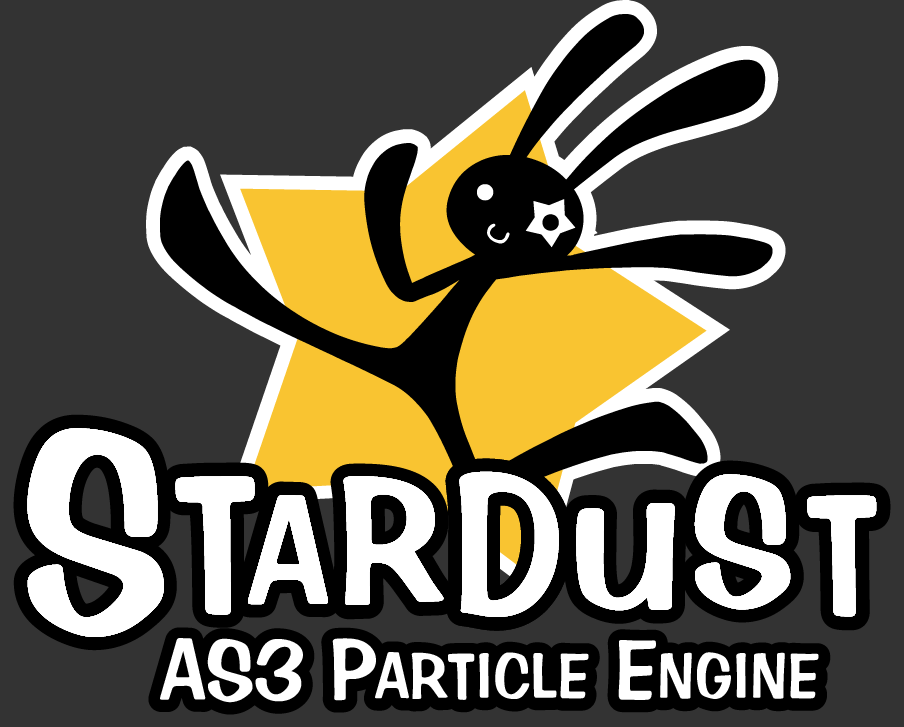
<style>
.page{position:relative;width:904px;height:727px;background:#333333}
.page>*{position:absolute;margin:0}
.t1{font:269.5px "DFPOP1-W9-HKP-BF";color:#ffffff;scale:0.93 1}
.t2{font:186.4px "DFPOP1-W9-HKP-BF";color:#ffffff}
.t3{font:183.3px "DFPOP1-W9-HKP-BF";color:#ffffff}
.t4{font:170.7px "DFPOP1-W9-HKP-BF";color:#ffffff}
.t5{font:174.4px "DFPOP1-W9-HKP-BF";color:#ffffff}
.t6{font:144.7px "DFPOP1-W9-HKP-BF";color:#ffffff}
.t7{font:160.2px "DFPOP1-W9-HKP-BF";color:#ffffff}
.t8{font:143.7px "DFPOP1-W9-HKP-BF";color:#ffffff;scale:1.3 1}
.t9{font:61.5px "DFPOP1-W9-HKP-BF";color:#ffffff}
.t10{font:82px "DFPOP1-W9-HKP-BF";color:#ffffff}
</style>
<div class="page">
<p class="t1" style="left:27px;top:428px;width:137px;height:209px">S</p>
<p class="t1" style="left:27px;top:428px;width:137px;height:209px">S</p>
<p class="t1" style="left:27px;top:428px;width:137px;height:209px">S</p>
<p class="t1" style="left:27px;top:428px;width:137px;height:209px">S</p>
<p class="t1" style="left:27px;top:428px;width:137px;height:209px">S</p>
<p class="t2" style="left:459px;top:471px;width:100px;height:146px">D</p>
<p class="t2" style="left:459px;top:471px;width:100px;height:146px">D</p>
<p class="t2" style="left:459px;top:471px;width:100px;height:146px">D</p>
<p class="t2" style="left:459px;top:471px;width:100px;height:146px">D</p>
<p class="t2" style="left:459px;top:471px;width:100px;height:146px">D</p>
<p class="t3" style="left:175px;top:476px;width:80px;height:139px">T</p>
<p class="t3" style="left:175px;top:476px;width:80px;height:139px">T</p>
<p class="t3" style="left:175px;top:476px;width:80px;height:139px">T</p>
<p class="t3" style="left:175px;top:476px;width:80px;height:139px">T</p>
<p class="t3" style="left:175px;top:476px;width:80px;height:139px">T</p>
<p class="t4" style="left:343px;top:476px;width:101px;height:129px">R</p>
<p class="t4" style="left:343px;top:476px;width:101px;height:129px">R</p>
<p class="t4" style="left:343px;top:476px;width:101px;height:129px">R</p>
<p class="t4" style="left:343px;top:476px;width:101px;height:129px">R</p>
<p class="t4" style="left:343px;top:476px;width:101px;height:129px">R</p>
<p class="t5" style="left:694px;top:474px;width:97px;height:136px">S</p>
<p class="t5" style="left:694px;top:474px;width:97px;height:136px">S</p>
<p class="t5" style="left:694px;top:474px;width:97px;height:136px">S</p>
<p class="t5" style="left:694px;top:474px;width:97px;height:136px">S</p>
<p class="t5" style="left:694px;top:474px;width:97px;height:136px">S</p>
<p class="t6" style="left:248px;top:495px;width:80px;height:110px">A</p>
<p class="t6" style="left:248px;top:495px;width:80px;height:110px">A</p>
<p class="t6" style="left:248px;top:495px;width:80px;height:110px">A</p>
<p class="t6" style="left:248px;top:495px;width:80px;height:110px">A</p>
<p class="t6" style="left:248px;top:495px;width:80px;height:110px">A</p>
<p class="t7" style="left:807px;top:495px;width:70px;height:122px">T</p>
<p class="t7" style="left:807px;top:495px;width:70px;height:122px">T</p>
<p class="t7" style="left:807px;top:495px;width:70px;height:122px">T</p>
<p class="t7" style="left:807px;top:495px;width:70px;height:122px">T</p>
<p class="t7" style="left:807px;top:495px;width:70px;height:122px">T</p>
<p class="t8" style="left:576px;top:503px;width:99px;height:108px">U</p>
<p class="t8" style="left:576px;top:503px;width:99px;height:108px">U</p>
<p class="t8" style="left:576px;top:503px;width:99px;height:108px">U</p>
<p class="t8" style="left:576px;top:503px;width:99px;height:108px">U</p>
<p class="t8" style="left:576px;top:503px;width:99px;height:108px">U</p>
<p class="t9" style="left:160px;top:638px;width:659px;height:65px"><span class="t10">AS3 P</span>ARTICLE<span class="t10"> E</span>NGINE</p>
<p class="t9" style="left:160px;top:638px;width:659px;height:65px"><span class="t10">AS3 P</span>ARTICLE<span class="t10"> E</span>NGINE</p>
</div>
